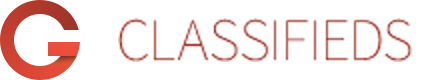
<style>
.page{position:relative;width:440px;height:80px;background:#ffffff}
.page>*{position:absolute;margin:0}
.t1{font:60px "SourceSansPro-ExtraLight";color:#9d3024;text-transform:uppercase}
</style>
<div class="page">
<p class="t1" style="left:118px;top:18px;width:294px;height:44px">CLASSIFIEDS</p>
</div>
